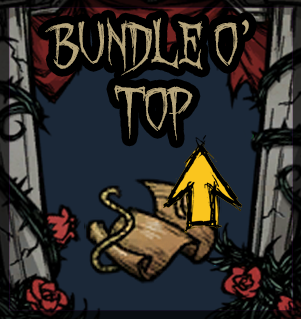
<style>
.page{position:relative;width:301px;height:319px;background:#1b2838}
.page>*{position:absolute;margin:0}
.t1{font:53.5px "OctoberCrow";color:#b6a57b}
</style>
<div class="page">
<p class="t1" style="left:45px;top:17px;width:204px;height:124px;text-align:center">Bundle o’<br>Top</p>
</div>
